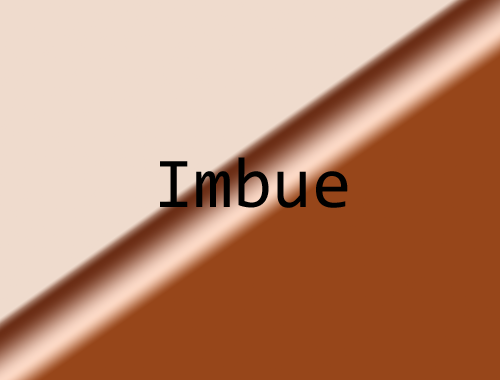
<style>
.page{position:relative;width:500px;height:380px;background:#97461a}
.page>*{position:absolute;margin:0}
.t1{font:71.7px "Consolas";color:#000000}
</style>
<div class="page">
<p class="t1" style="left:160px;top:157px;width:188px;height:51px">Imbue</p>
</div>
